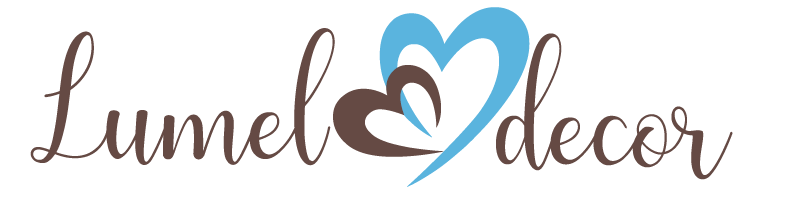
<style>
.page{position:relative;width:800px;height:200px;background:#ffffff}
.page>*{position:absolute;margin:0}
.t1{font:291.7px "fotograami-hearts01";letter-spacing:0.005em;color:#5ab4de}
.t2{font:166.7px "Humble";color:#654a44}
.t3{font:137.5px "fotograami-hearts01";letter-spacing:0.005em;color:#654a44}
</style>
<div class="page">
<p class="t1" style="left:379px;top:7px;width:151px;height:180px">Y</p>
<p class="t2" style="left:30px;top:28px;width:305px;height:138px">Lumel</p>
<p class="t2" style="left:496px;top:33px;width:237px;height:147px">decor</p>
<p class="t3" style="left:333px;top:65px;width:111px;height:92px">W</p>
</div>
